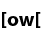
<style>
.page{position:relative;width:42px;height:42px;background:#ffffff}
.page>*{position:absolute;margin:0}
.t1{font:20.8px "MyriadPro-Bold";color:#000000}
</style>
<div class="page">
<p class="t1" style="left:2px;top:12px;width:39px;height:16px">[ow[</p>
</div>
